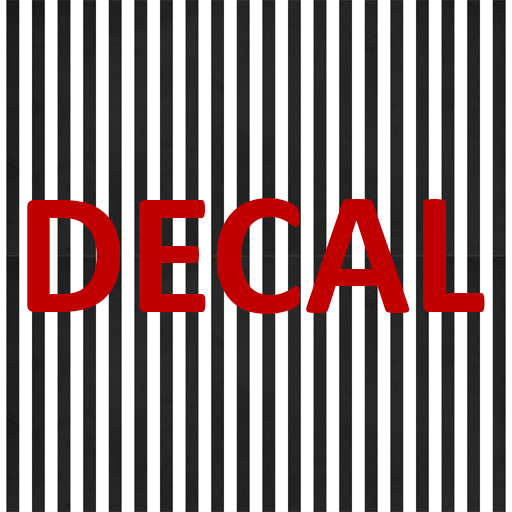
<style>
.page{position:relative;width:512px;height:512px;background:#ffffff}
.page>*{position:absolute;margin:0}
.t1{font:177px "Calibri-Bold";color:#c00000}
</style>
<div class="page">
<p class="t1" style="left:27px;top:198px;width:458px;height:116px">DECAL</p>
</div>
